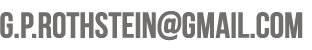
<style>
.page{position:relative;width:312px;height:50px;background:#ffffff}
.page>*{position:absolute;margin:0}
.t1{font:36px "BebasNeue";letter-spacing:-0.025em;color:#706f6e;font-weight:bold}
</style>
<div class="page">
<p class="t1" style="left:0px;top:11px;width:303px;height:30px">g.p.rothstein@gmail.com</p>
</div>
